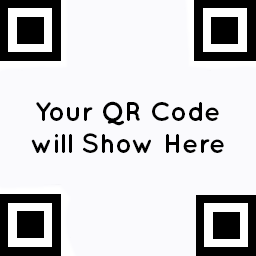
<style>
.page{position:relative;width:256px;height:256px;background:#fafafd}
.page>*{position:absolute;margin:0}
.t1{font:27.1px "Quicksand-Bold";color:#000000}
</style>
<div class="page">
<p class="t1" style="left:31px;top:101px;width:193px;height:52px;text-align:center">Your QR Code<br>will Show Here</p>
</div>
